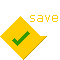
<style>
.page{position:relative;width:60px;height:60px;background:#ffffff}
.page>*{position:absolute;margin:0}
.t1{font:12px "Verdana";color:#ffcc00}
</style>
<div class="page">
<p class="t1" style="left:30px;top:15px;width:28px;height:7px">save</p>
</div>
